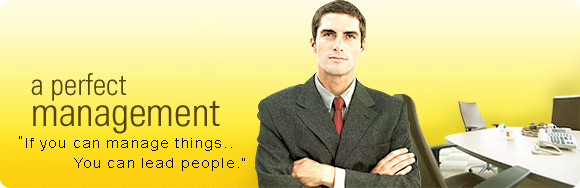
<style>
.page{position:relative;width:580px;height:188px}
.page>*{position:absolute;margin:0}
.t1{font:14.4px "ArialMT";letter-spacing:0.075em;color:#070707;scale:1.08 1}
</style>
<div class="page">
<p class="t1" style="left:19px;top:136px;width:3px;height:3px">“</p>
<p class="t1" style="left:26px;top:138px;width:206px;height:13px">If you can manage things..</p>
<p class="t1" style="left:74px;top:158px;width:171px;height:13px">You can lead people.”</p>
</div>
